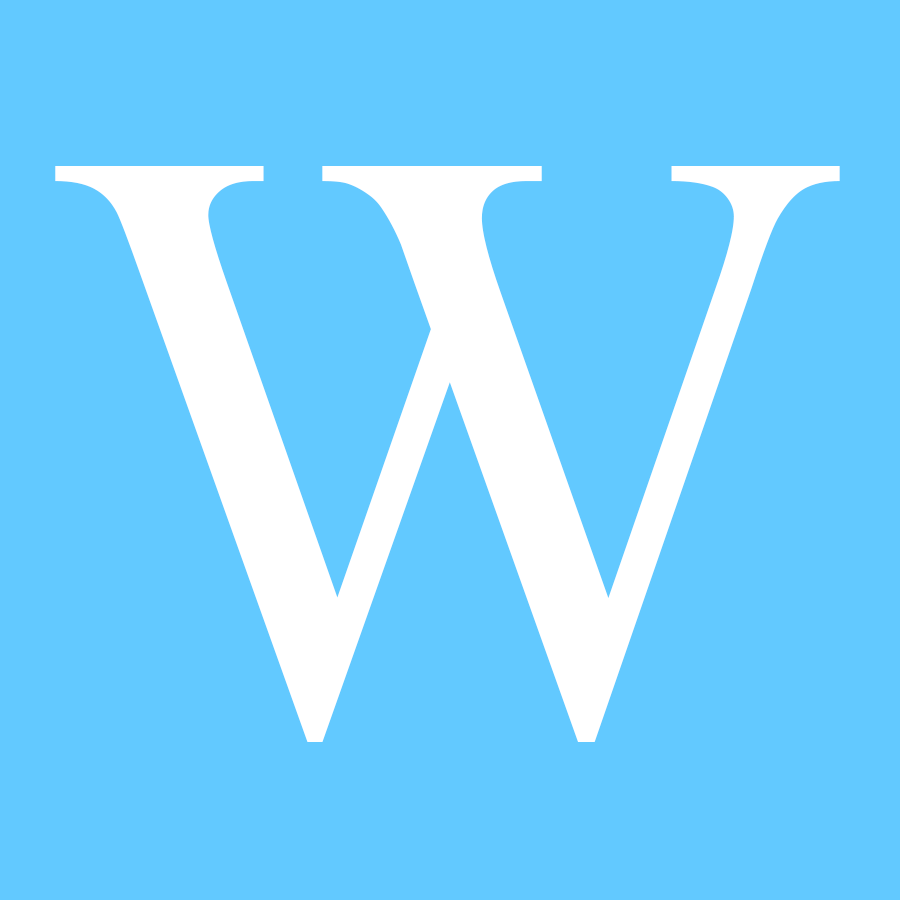
<style>
.page{position:relative;width:900px;height:900px;background:#62c9ff}
.page>*{position:absolute;margin:0}
.t1{font:850px "TimesNewRomanPSMT";color:#ffffff}
</style>
<div class="page">
<p class="t1" style="left:55px;top:166px;width:785px;height:576px">W</p>
</div>
